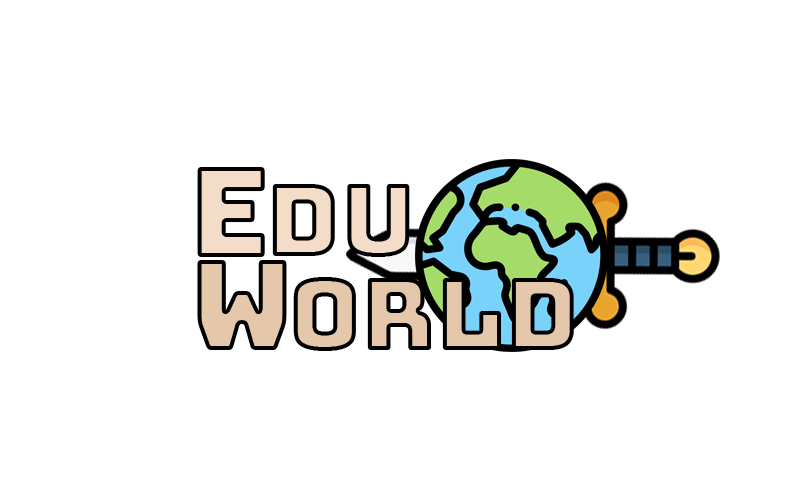
<style>
.page{position:relative;width:800px;height:500px;background:#ffffff}
.page>*{position:absolute;margin:0}
.t1{font:125px "Bungee-Regular";color:#f3ddc8}
.t2{font:100px "Bungee-Regular";color:#f3ddc8}
.t3{font:125px "Bungee-Regular";color:#e5c7ac}
.t4{font:100px "Bungee-Regular";color:#e5c7ac}
</style>
<div class="page">
<p class="t1" style="left:197px;top:167px;width:68px;height:90px">E</p>
<p class="t2" style="left:272px;top:184px;width:138px;height:73px">du</p>
<p class="t3" style="left:197px;top:260px;width:90px;height:90px">W</p>
<p class="t4" style="left:293px;top:277px;width:281px;height:74px">orld</p>
</div>
